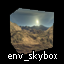
<style>
.page{position:relative;width:64px;height:64px;background:#000000}
.page>*{position:absolute;margin:0}
.t1{font:9px "Tahoma";color:#ffffff}
</style>
<div class="page">
<p class="t1" style="left:8px;top:51px;width:49px;height:10px">env_skybox</p>
</div>
